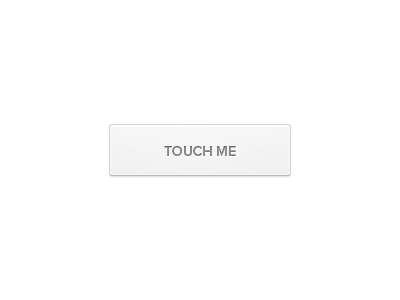
<style>
.page{position:relative;width:400px;height:300px;background:#ffffff}
.page>*{position:absolute;margin:0}
.t1{font:14px "ProximaNova-Semibold";color:#969696}
</style>
<div class="page">
<p class="t1" style="left:164px;top:146px;width:72px;height:10px">TOUCH ME</p>
</div>
